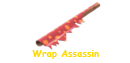
<style>
.page{position:relative;width:130px;height:63px;background:#ffffff}
.page>*{position:absolute;margin:0}
.t1{font:9px "ComicSansMS-Bold";letter-spacing:0.025em;color:#ffd800}
</style>
<div class="page">
<p class="t1" style="left:32px;top:50px;width:67px;height:9px">Wrap Assassin</p>
</div>
